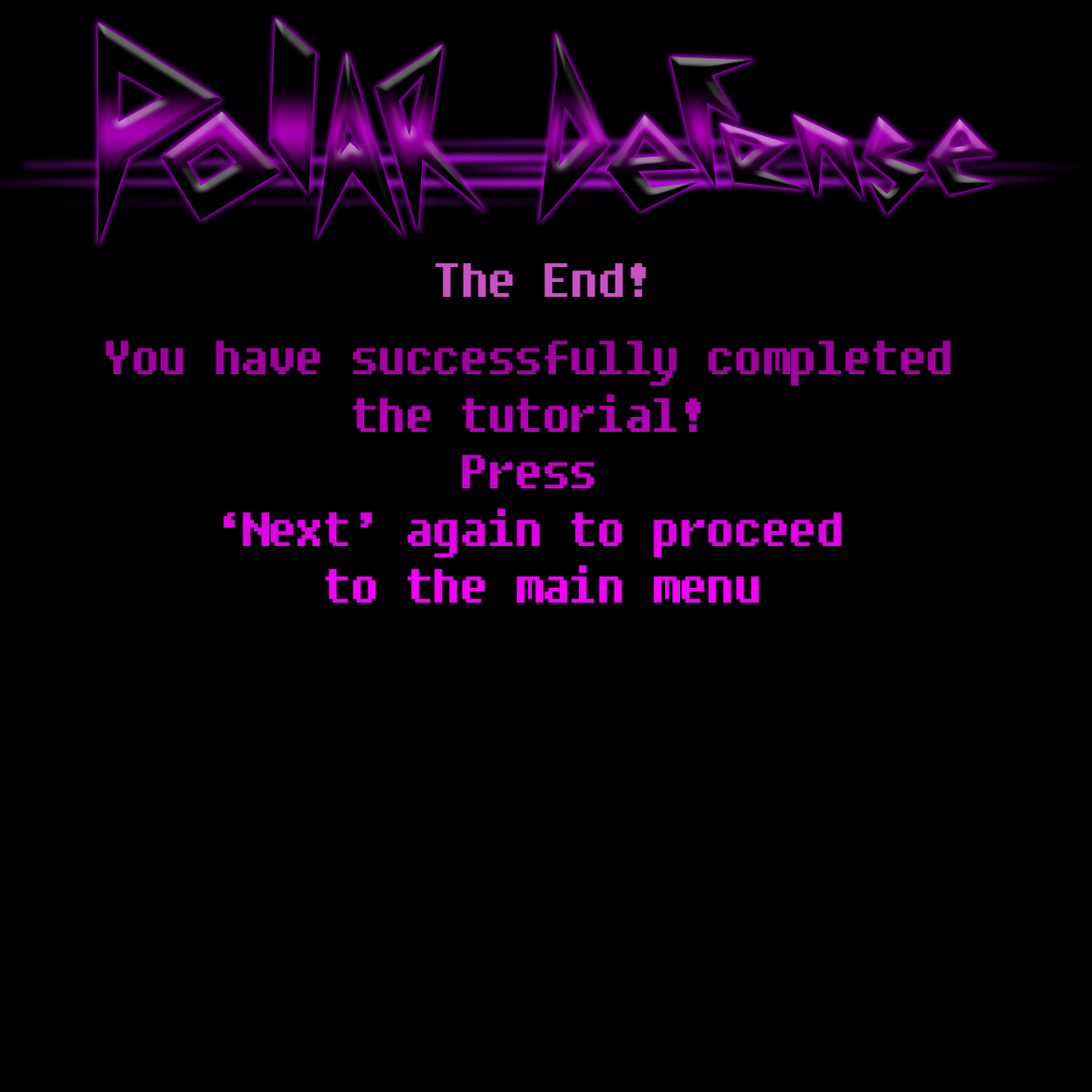
<style>
.page{position:relative;width:1092px;height:1092px;background:#000000}
.page>*{position:absolute;margin:0}
.t1{font:47.7px "Fixedsys";letter-spacing:-0.05em;color:#c852c4}
.t2{font:47.7px "Fixedsys";letter-spacing:-0.05em}
</style>
<div class="page">
<p class="t1" style="left:435px;top:263px;width:211px;height:34px">The End!</p>
<p class="t2" style="left:105px;top:341px;width:846px;height:262px;text-align:center">You have successfully completed <br>the tutorial! <br>Press <br>‘Next’ again to proceed <br>to the main menu</p>
</div>
